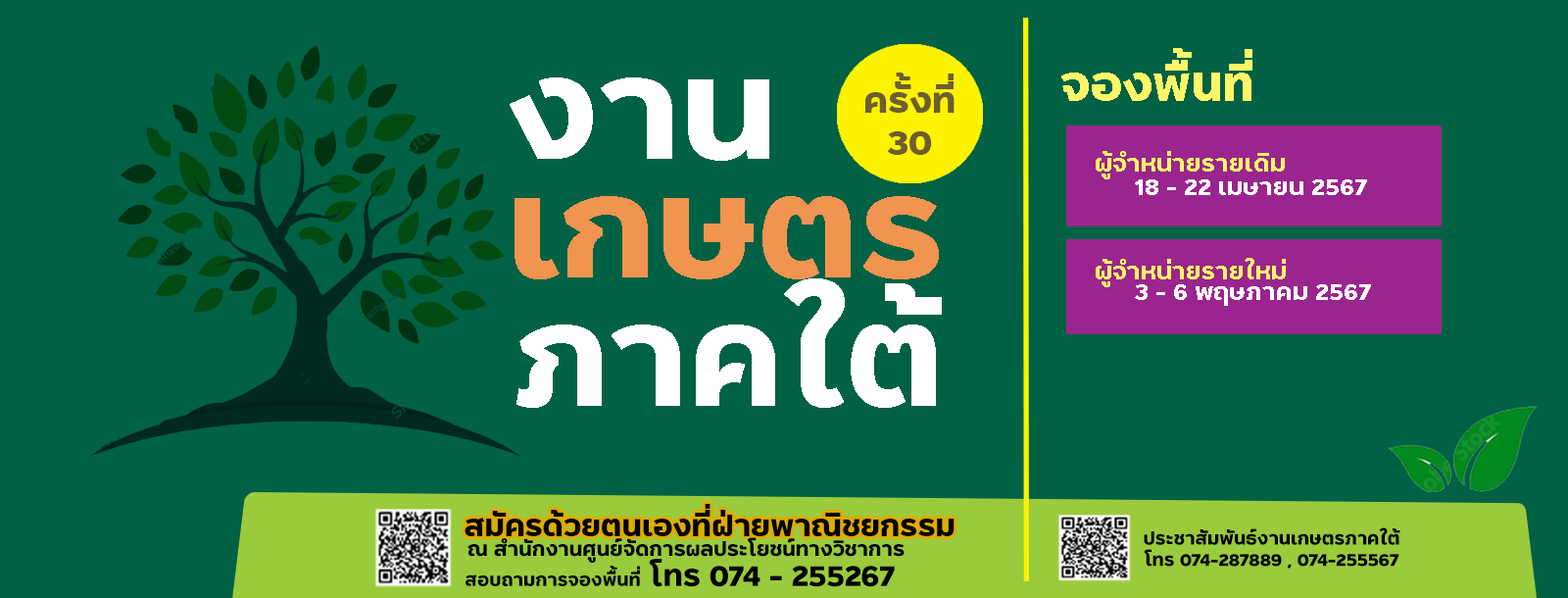
<style>
.page{position:relative;width:1568px;height:598px;background:#016145}
.page>*{position:absolute;margin:0}
.t1{font:47px "PSUStidti-Bold";color:#fef668}
.t2{font:137.2px "PSUStidti-Bold";color:#ffffff;scale:1.04 1}
.t3{font:35.3px "PSUStidti-Bold";color:#6d5d31}
.t4{font:23.5px "PSUStidti-Bold";color:#fef668}
.t5{font:23.5px "PSUStidti-Bold";color:#ffffff}
.t6{font:146.9px "PSUStidti-Bold";color:#ffffff;scale:1.04 1}
.t7{font:137.2px "PSUStidti-Bold";color:#f09450;scale:1.04 1}
.t8{font:137.3px "PSUStidti-Bold";color:#ffffff}
.t9{font:29.4px "PSUStidti-Bold";color:#000000}
.t10{font:17.6px "PSUStidti-Bold";color:#000000}
.t11{font:19.6px "PSUStidti-Bold";color:#000000}
.t12{font:17.8px "PSUStidti-Bold";color:#000000}
.t13{font:29.7px "PSUStidti-Bold";color:#000000}
</style>
<div class="page">
<p class="t1" style="left:1061px;top:48px;width:191px;height:53px">จองพื้นที่</p>
<p class="t2" style="left:510px;top:77px;width:259px;height:84px">งาน</p>
<p class="t3" style="left:865px;top:73px;width:90px;height:82px;text-align:center">ครั้งที่<br>30</p>
<p class="t4" style="left:1096px;top:151px;width:189px;height:28px">ผู้จำหน่ายรายเดิม</p>
<p class="t5" style="left:1135px;top:179px;width:232px;height:16px">18 - 22 เมษายน 2567</p>
<p class="t6" style="left:514px;top:196px;width:425px;height:83px"><span class="t7">เกษตร<br><br></span><br>ภาคใต้</p>
<p class="t4" style="left:1096px;top:258px;width:190px;height:29px">ผู้จำหน่ายรายใหม่</p>
<p class="t8" style="left:516px;top:278px;width:426px;height:130px">ภาคใต้</p>
<p class="t5" style="left:1135px;top:284px;width:236px;height:22px">3 - 6 พฤษภาคม 2567</p>
<p class="t9" style="left:465px;top:504px;width:490px;height:32px">สมัครด้วยตนเองที่ฝ่ายพาณิชยกรรม</p>
<p class="t10" style="left:1144px;top:527px;width:256px;height:41px;text-align:center">ประชาสัมพันธ์งานเกษตรภาคใต้ <br>โทร 074-287889 , 074-255567</p>
<p class="t11" style="left:467px;top:537px;width:438px;height:26px">ณ สำนักงานศูนย์จัดการผลประโยชน์ทางวิชาการ</p>
<p class="t12" style="left:466px;top:559px;width:429px;height:28px">สอบถามการจองพื้นที่<span class="t13"> โทร 074 - 255267</span></p>
</div>
